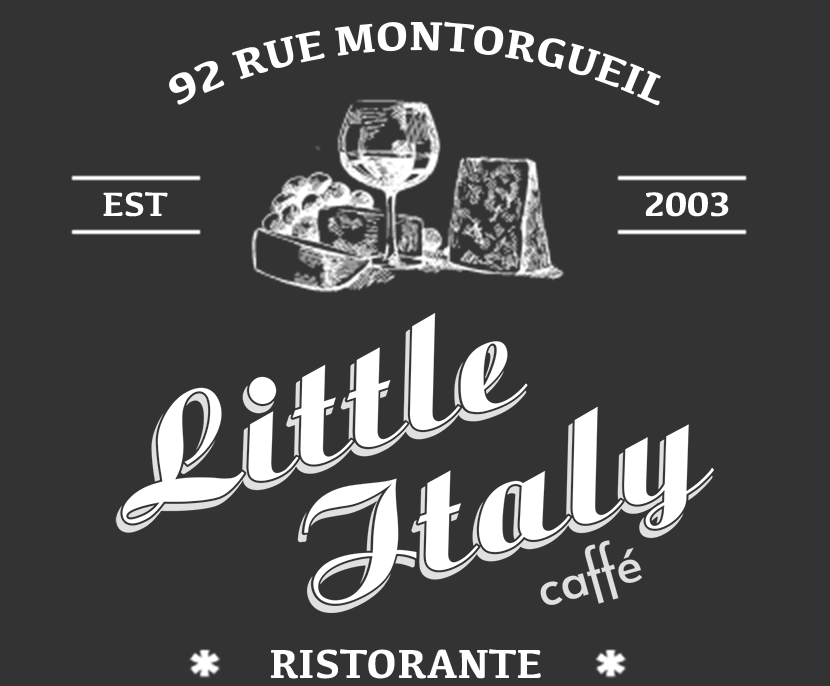
<style>
.page{position:relative;width:830px;height:686px;background:#333333}
.page>*{position:absolute;margin:0}
.t1{font:42px "Kefa-Bold";color:#ffffff}
.t2{font:35px "Kefa-Bold";color:#ffffff}
</style>
<div class="page">
<p class="t1" style="left:169px;top:21px;width:492px;height:85px">92 RUE MONTORGUEIL</p>
<p class="t2" style="left:103px;top:191px;width:65px;height:26px">EST</p>
<p class="t2" style="left:645px;top:192px;width:84px;height:25px">2003</p>
<p class="t1" style="left:270px;top:649px;width:271px;height:30px">RISTORANTE</p>
</div>
